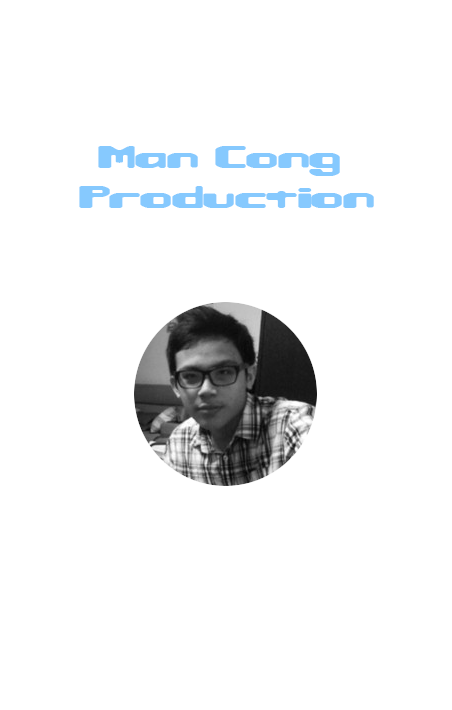
<style>
.page{position:relative;width:452px;height:710px;background:#ffffff}
.page>*{position:absolute;margin:0}
.t1{font:33.3px "MacropsiaBRK";color:#86c9fe}
</style>
<div class="page">
<p class="t1" style="left:79px;top:146px;width:295px;height:62px">Man Cong<br> Production</p>
</div>
